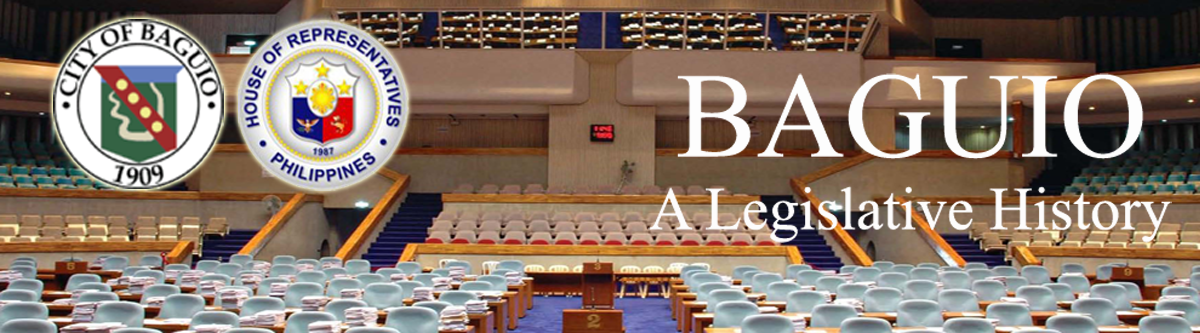
<style>
.page{position:relative;width:1200px;height:333px}
.page>*{position:absolute;margin:0}
.t1{font:60.5px "TimesNewRomanPSMT";color:#fdfcfc}
.t2{font:121.1px "TimesNewRomanPSMT";color:#fdfdfd}
</style>
<div class="page">
<p class="t1" style="left:648px;top:73px;width:524px;height:170px;text-align:center"><span class="t2">BAGUIO<br></span>A Legislative History</p>
</div>
